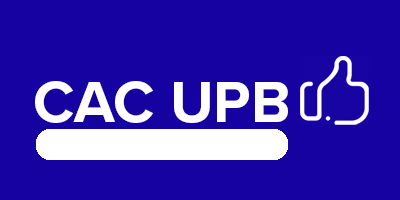
<style>
.page{position:relative;width:400px;height:200px;background:#1502a1}
.page>*{position:absolute;margin:0}
.t1{font:60px "FONTSPRINGDEMO-ProximaNovaBold";color:#ffffff}
</style>
<div class="page">
<p class="t1" style="left:35px;top:81px;width:253px;height:42px">CAC UPB</p>
</div>
